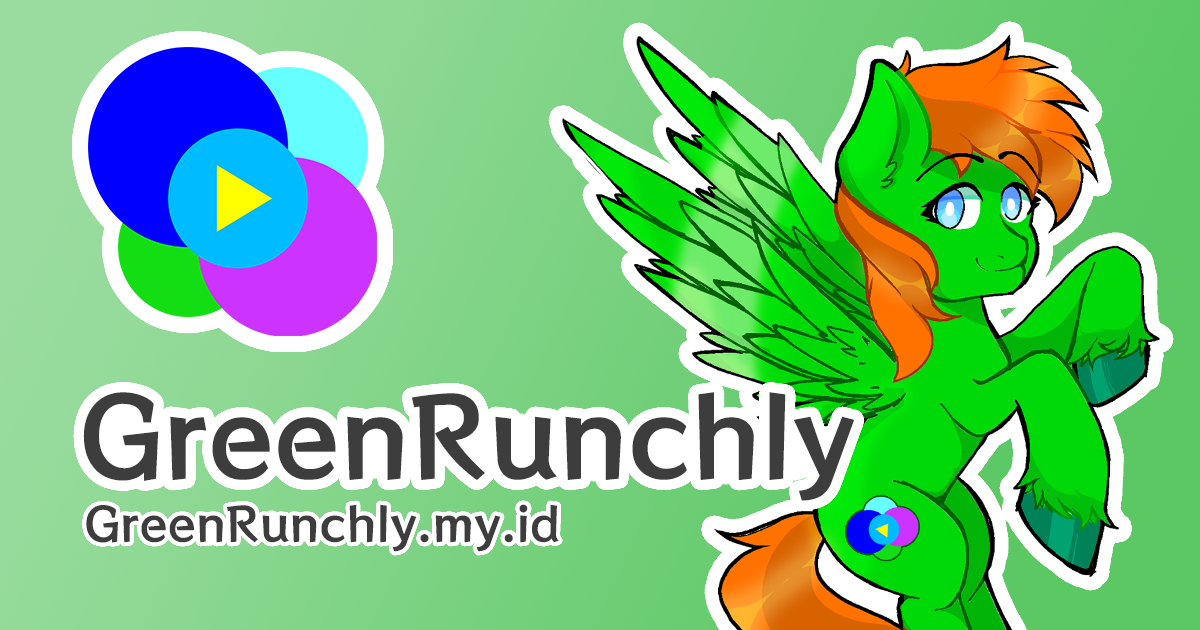
<style>
.page{position:relative;width:1200px;height:630px}
.page>*{position:absolute;margin:0}
.t1{font:107.7px "RocknRollOne-Regular";color:#3d3d3d}
.t2{font:46.1px "RocknRollOne-Regular";color:#3d3d3d}
</style>
<div class="page">
<p class="t1" style="left:83px;top:392px;width:771px;height:109px">GreenRunchly</p>
<p class="t2" style="left:86px;top:504px;width:473px;height:48px">GreenRunchly.my.id</p>
</div>
